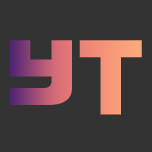
<style>
.page{position:relative;width:152px;height:152px;background:#333333}
.page>*{position:absolute;margin:0}
.t1{font:90.5px "Moltors"}
</style>
<div class="page">
<p class="t1" style="left:9px;top:40px;width:133px;height:75px">yt</p>
</div>
